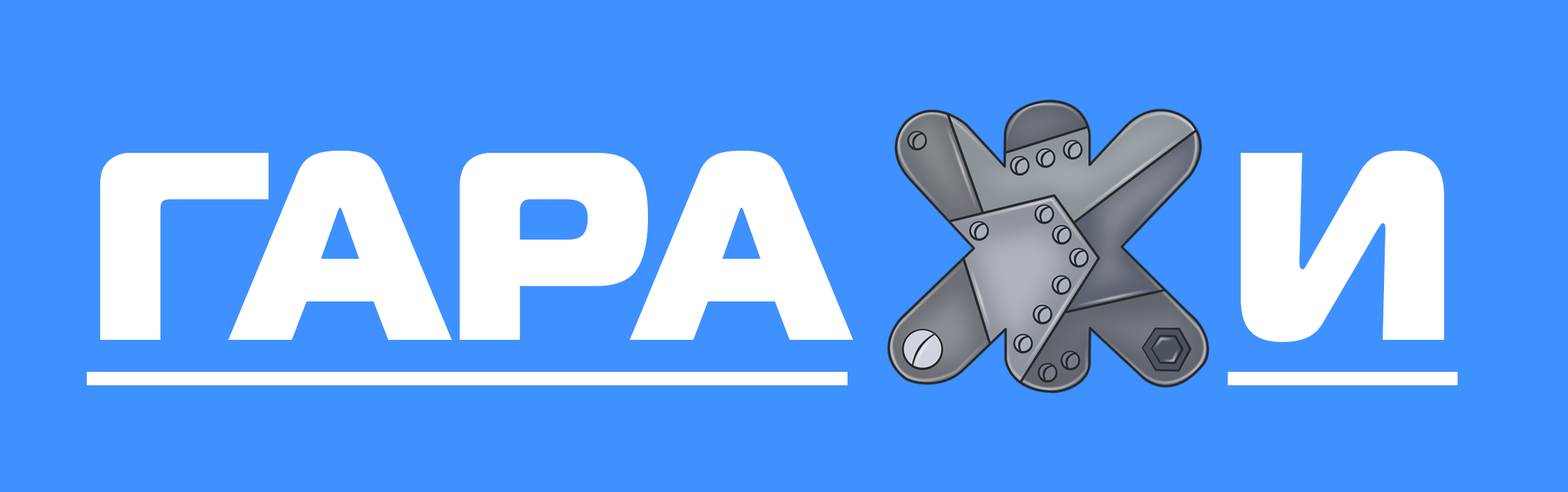
<style>
.page{position:relative;width:1568px;height:492px;background:#3e91ff}
.page>*{position:absolute;margin:0}
.t1{font:266.4px "MagistralBlackC";color:#ffffff;text-decoration:underline}
</style>
<div class="page">
<p class="t1" style="left:87px;top:151px;width:766px;height:234px">ГАРА</p>
<p class="t1" style="left:1228px;top:151px;width:230px;height:234px">И</p>
</div>
